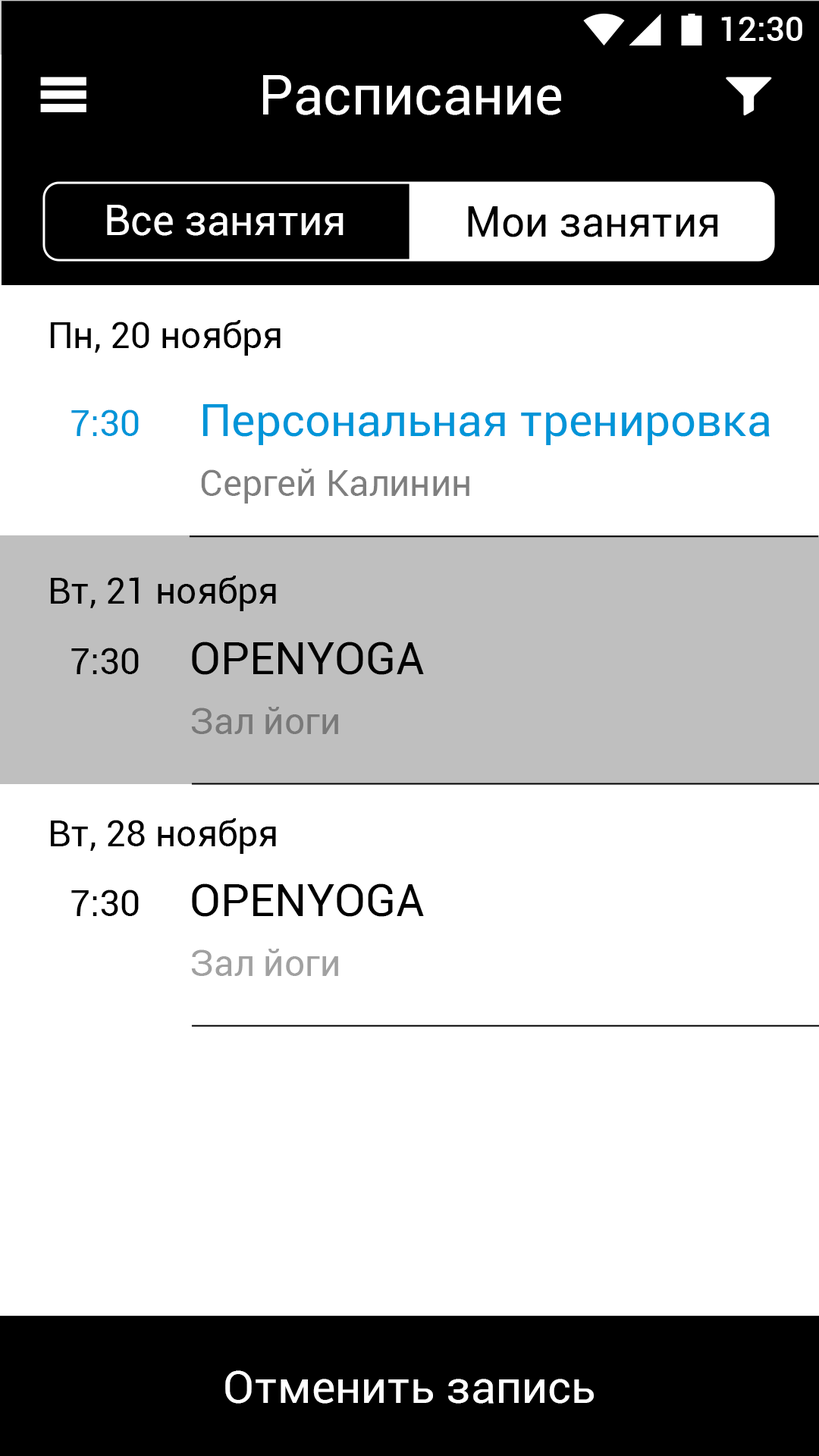
<style>
.page{position:relative;width:819px;height:1456px;background:#ffffff}
.page>*{position:absolute;margin:0}
.t1{font:33.4px "Roboto-Medium";color:#ffffff}
.t2{font:54.6px "Roboto-Regular";color:#ffffff}
.t3{font:41.7px "Roboto-Regular";color:#ffffff}
.t4{font:41.7px "Roboto-Regular";color:#000000}
.t5{font:36.4px "Roboto-Regular";color:#000000}
.t6{font:36.4px "Roboto-Regular";color:#0095d8}
.t7{font:45.5px "Roboto-Regular";color:#0095d8}
.t8{font:36.4px "Roboto-Regular";color:#7f7f7f}
.t9{font:45.5px "Roboto-Regular";color:#000000}
.t10{font:36.4px "Roboto-Regular";color:#797979}
.t11{font:36.4px "Roboto-Regular";color:#a1a1a1}
.t12{font:45.5px "Roboto-Regular";color:#ffffff}
</style>
<div class="page">
<p class="t1" style="left:721px;top:17px;width:81px;height:24px">12:30</p>
<p class="t2" style="left:263px;top:75px;width:298px;height:40px">Расписание</p>
<p class="t3" style="left:107px;top:205px;width:237px;height:31px">Все занятия</p>
<p class="t4" style="left:468px;top:206px;width:250px;height:31px">Мои занятия</p>
<p class="t5" style="left:50px;top:320px;width:231px;height:36px">Пн, 20 ноября</p>
<p class="t6" style="left:71px;top:409px;width:68px;height:27px">7:30</p>
<p class="t7" style="left:202px;top:404px;width:568px;height:41px">Персональная тренировка</p>
<p class="t8" style="left:201px;top:469px;width:268px;height:35px">Сергей Калинин</p>
<p class="t5" style="left:51px;top:576px;width:225px;height:35px">Вт, 21 ноября</p>
<p class="t9" style="left:192px;top:642px;width:232px;height:33px">OPENYOGA</p>
<p class="t5" style="left:71px;top:648px;width:68px;height:26px">7:30</p>
<p class="t10" style="left:191px;top:707px;width:147px;height:27px">Зал йоги</p>
<p class="t5" style="left:51px;top:818px;width:225px;height:36px">Вт, 28 ноября</p>
<p class="t5" style="left:71px;top:890px;width:68px;height:26px">7:30</p>
<p class="t9" style="left:192px;top:883px;width:232px;height:34px">OPENYOGA</p>
<p class="t11" style="left:191px;top:949px;width:147px;height:27px">Зал йоги</p>
<p class="t12" style="left:225px;top:1370px;width:369px;height:34px">Отменить запись</p>
</div>
